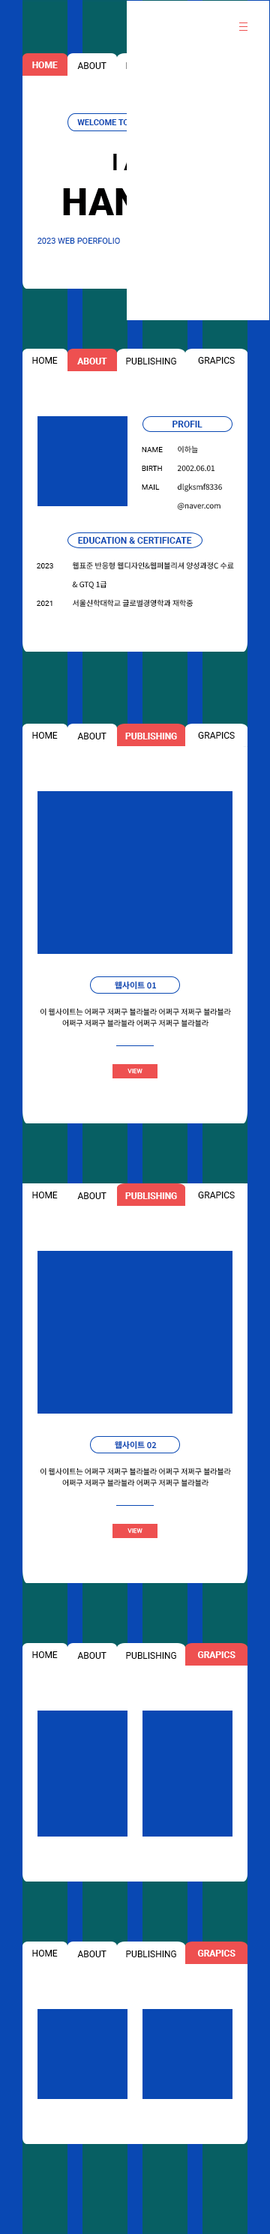
<style>
.page{position:relative;width:270px;height:2234px;background:#ffffff}
.page>*{position:absolute;margin:0}
.t1{font:9px "Roboto-Bold";color:#ffffff}
.t2{font:9px "Roboto-Regular";color:#000000}
.t3{font:8.2px "Roboto-Bold"}
.t4{font:37.5px "Roboto-Black"}
.t5{font:8.2px "Roboto-Regular";color:#0948b3}
.t6{font:9px "Roboto-Bold";color:#0948b3}
.t7{font:7.5px/18.8px "Roboto-Regular";color:#000000}
.t8{font:7.5px/18.8px "NotoSansKR-Regular";color:#000000}
.t9{font:8.2px "NotoSansKR-Bold";color:#0948b3}
.t10{font:7.5px/11.2px "NotoSansKR-Regular";color:#000000}
.t11{font:6px "Roboto-Regular";color:#ffffff}
</style>
<div class="page">
<p class="t1" style="left:32px;top:62px;width:26px;height:6px">HOME</p>
<p class="t2" style="left:77px;top:62px;width:29px;height:7px">ABOUT</p>
<p class="t3" style="left:77px;top:119px;width:117px;height:6px">WELCOME TO MY PORTFOLIO !</p>
<p class="t4" style="left:63px;top:188px;width:144px;height:27px">HANEUL</p>
<p class="t5" style="left:38px;top:238px;width:82px;height:6px">2023 WEB POERFOLIO</p>
<p class="t2" style="left:32px;top:357px;width:26px;height:7px">HOME</p>
<p class="t1" style="left:77px;top:358px;width:30px;height:6px">ABOUT</p>
<p class="t2" style="left:126px;top:358px;width:50px;height:6px">PUBLISHING</p>
<p class="t2" style="left:198px;top:357px;width:37px;height:7px">GRAPICS</p>
<p class="t6" style="left:172px;top:421px;width:30px;height:7px">PROFIL</p>
<p class="t7" style="left:142px;top:447px;width:21px;height:43px">NAME<br>BIRTH<br>MAIL</p>
<p class="t8" style="left:177px;top:446px;width:45px;height:64px">이하늘<br>2002.06.01<br>dlgksmf8336<br>@naver.com</p>
<p class="t6" style="left:78px;top:537px;width:114px;height:7px">EDUCATION &amp; CERTIFICATE</p>
<p class="t7" style="left:37px;top:563px;width:16px;height:43px">2023<br><br>2021</p>
<p class="t8" style="left:72px;top:562px;width:162px;height:45px">웹표준 반응형 웹디자인&amp;웹퍼블리셔 양성과정C 수료<br>&amp; GTQ 1급<br>서울신학대학교 글로벌경영학과 재학중</p>
<p class="t2" style="left:32px;top:732px;width:26px;height:7px">HOME</p>
<p class="t2" style="left:77px;top:733px;width:29px;height:7px">ABOUT</p>
<p class="t1" style="left:125px;top:733px;width:52px;height:7px">PUBLISHING</p>
<p class="t2" style="left:198px;top:732px;width:37px;height:7px">GRAPICS</p>
<p class="t9" style="left:115px;top:981px;width:42px;height:9px">웹사이트 01</p>
<p class="t10" style="left:40px;top:1008px;width:191px;height:19px;text-align:center">이 웹사이트는 어쩌구 저쩌구 블라블라 어쩌구 저쩌구 블라블라<br>어쩌구 저쩌구 블라블라 어쩌구 저쩌구 블라블라</p>
<p class="t11" style="left:128px;top:1069px;width:14px;height:5px">VIEW</p>
<p class="t2" style="left:32px;top:1192px;width:26px;height:6px">HOME</p>
<p class="t2" style="left:77px;top:1192px;width:29px;height:7px">ABOUT</p>
<p class="t1" style="left:125px;top:1192px;width:52px;height:7px">PUBLISHING</p>
<p class="t2" style="left:198px;top:1192px;width:37px;height:6px">GRAPICS</p>
<p class="t9" style="left:115px;top:1441px;width:42px;height:9px">웹사이트 02</p>
<p class="t10" style="left:40px;top:1468px;width:191px;height:18px;text-align:center">이 웹사이트는 어쩌구 저쩌구 블라블라 어쩌구 저쩌구 블라블라<br>어쩌구 저쩌구 블라블라 어쩌구 저쩌구 블라블라</p>
<p class="t11" style="left:128px;top:1528px;width:14px;height:6px">VIEW</p>
<p class="t2" style="left:32px;top:1652px;width:26px;height:6px">HOME</p>
<p class="t2" style="left:77px;top:1652px;width:29px;height:7px">ABOUT</p>
<p class="t2" style="left:126px;top:1652px;width:50px;height:7px">PUBLISHING</p>
<p class="t1" style="left:197px;top:1652px;width:39px;height:6px">GRAPICS</p>
<p class="t2" style="left:32px;top:1950px;width:26px;height:7px">HOME</p>
<p class="t1" style="left:197px;top:1950px;width:39px;height:7px">GRAPICS</p>
<p class="t2" style="left:77px;top:1951px;width:29px;height:7px">ABOUT</p>
<p class="t2" style="left:126px;top:1951px;width:50px;height:7px">PUBLISHING</p>
</div>
